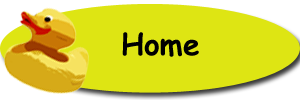
<style>
.page{position:relative;width:300px;height:100px;background:#dee513}
.page>*{position:absolute;margin:0}
.t1{font:30px "ComicSansMS-Bold";color:#000000}
</style>
<div class="page">
<p class="t1" style="left:122px;top:32px;width:77px;height:25px">Home</p>
</div>
